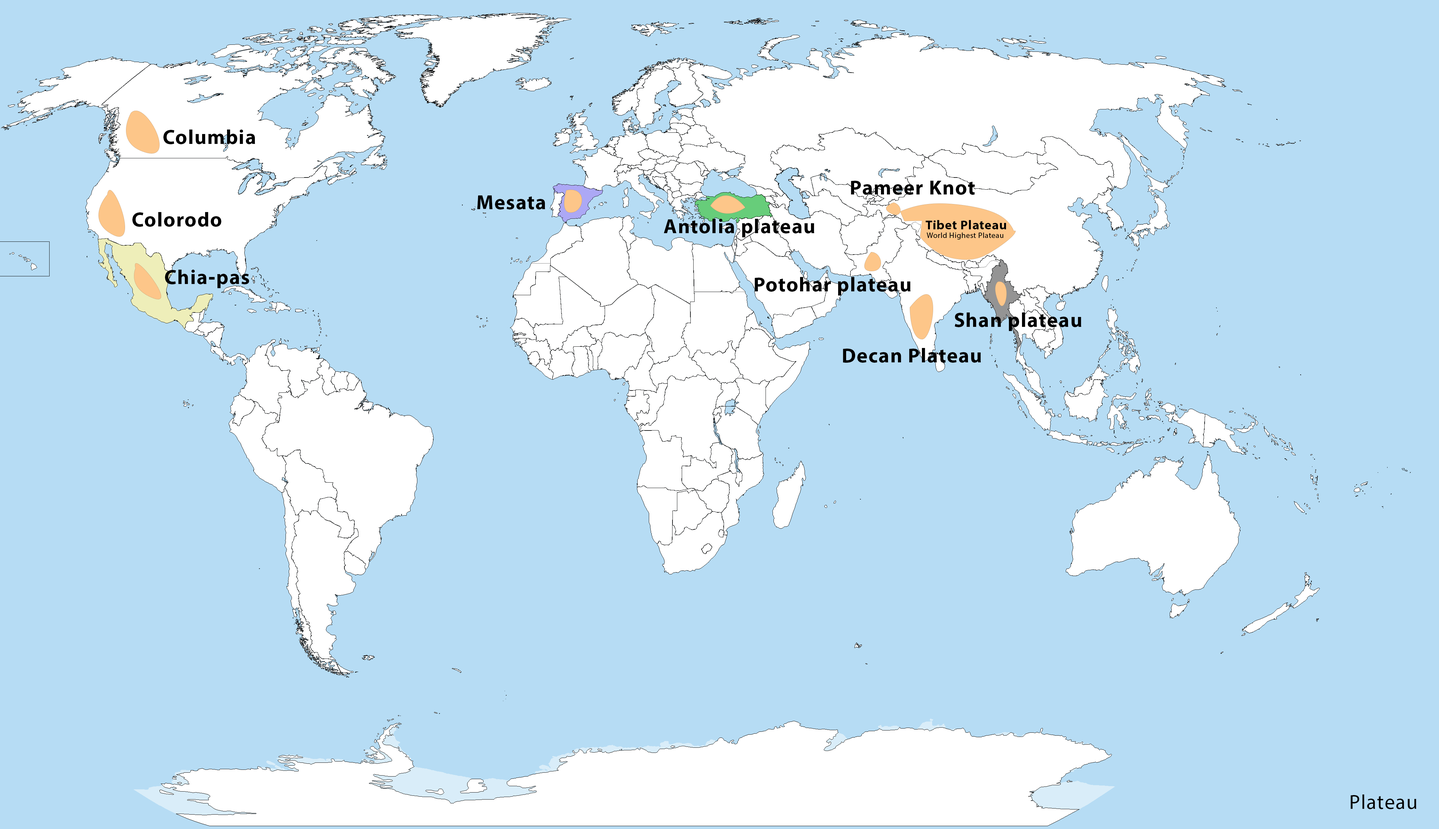
<style>
.page{position:relative;width:1439px;height:829px;background:#b6dcf4}
.page>*{position:absolute;margin:0}
.t1{font:20.5px "MyriadHebrew-Bold";letter-spacing:0.04em;color:#000000}
.t2{font:12.8px "MyriadHebrew-Bold";letter-spacing:0.04em;color:#000000}
.t3{font:7.7px "MyriadHebrew-Regular";letter-spacing:0.04em;color:#000000}
.t4{font:20.5px "MyriadHebrew-Regular";letter-spacing:0.04em;color:#000000}
</style>
<div class="page">
<p class="t1" style="left:163px;top:129px;width:92px;height:15px">Columbia</p>
<p class="t1" style="left:851px;top:181px;width:124px;height:14px">Pameer Knot</p>
<p class="t1" style="left:477px;top:195px;width:68px;height:14px">Mesata</p>
<p class="t1" style="left:132px;top:212px;width:89px;height:15px">Colorodo</p>
<p class="t1" style="left:664px;top:219px;width:150px;height:18px">Antolia plateau</p>
<p class="t2" style="left:925px;top:220px;width:81px;height:9px">Tibet Plateau</p>
<p class="t3" style="left:927px;top:232px;width:76px;height:7px">World Highest Plateau</p>
<p class="t1" style="left:165px;top:270px;width:84px;height:18px">Chia-pas</p>
<p class="t1" style="left:755px;top:277px;width:155px;height:18px">Potohar plateau</p>
<p class="t1" style="left:954px;top:312px;width:127px;height:19px">Shan plateau</p>
<p class="t1" style="left:843px;top:348px;width:138px;height:15px">Decan Plateau</p>
<p class="t4" style="left:1351px;top:794px;width:65px;height:15px">Plateau</p>
</div>
